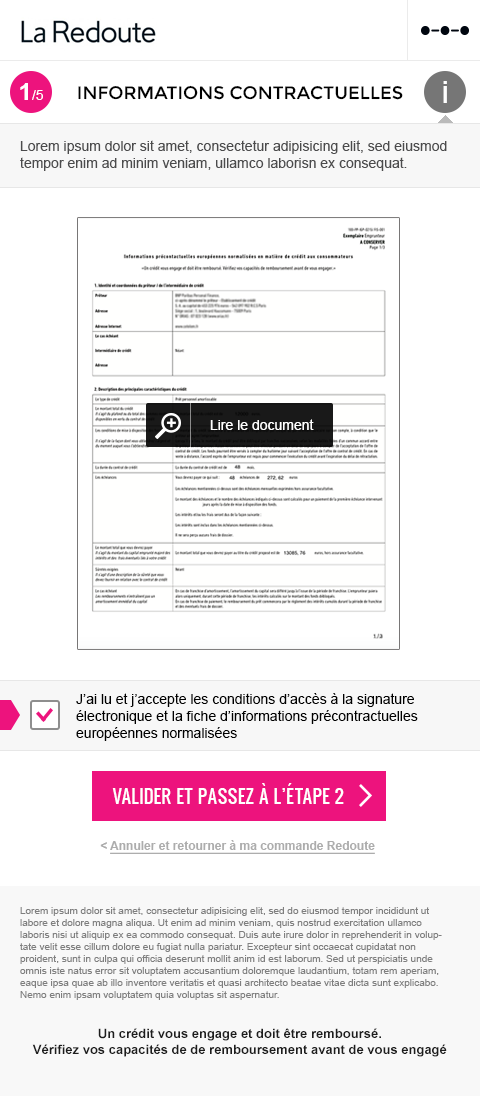
<style>
.page{position:relative;width:480px;height:1096px;background:#ffffff}
.page>*{position:absolute;margin:0}
.t1{font:14px "ArialMT";color:#ffffff}
.t2{font:24px "Arial-BoldMT";color:#ffffff}
.t3{font:18px "Montserrat-Regular";color:#000000;text-transform:uppercase}
.t4{font:25.8px "Oswald";color:#ffffff}
.t5{font:14px "ArialMT";color:#4b4b4c}
.t6{font:14px "ArialMT";color:#000000}
.t7{font:18px "Oswald";color:#ffffff;text-transform:uppercase}
.t8{font:12px "Arial-BoldMT";color:#adadad;text-decoration:underline}
.t9{font:12px "Arial-BoldMT";color:#adadad}
.t10{font:10px "ArialMT";color:#7f7f7f}
.t11{font:13px "Arial-BoldMT";color:#1d1d1d}
</style>
<div class="page">
<p class="t1" style="left:20px;top:83px;width:23px;height:17px"><span class="t2">1</span>/5</p>
<p class="t3" style="left:78px;top:85px;width:325px;height:15px">Informations cONTRACTUELLES</p>
<p class="t4" style="left:443px;top:81px;width:4px;height:22px">i</p>
<p class="t5" style="left:20px;top:140px;width:427px;height:31px">Lorem ipsum dolor sit amet, consectetur adipisicing elit, sed eiusmod tempor enim ad minim veniam, ullamco laborisn ex consequat.</p>
<p class="t1" style="left:210px;top:419px;width:104px;height:11px">Lire le document</p>
<p class="t6" style="left:76px;top:693px;width:342px;height:48px">J’ai lu et j’accepte les conditions d’accès à la signature<br>électronique et la fiche d’informations précontractuelles<br>européennes normalisées</p>
<p class="t7" style="left:112px;top:783px;width:232px;height:21px">Valider et passez à l’étape 2</p>
<p class="t8" style="left:100px;top:840px;width:275px;height:14px"><span class="t9">&lt; </span>Annuler et retourner à ma commande Redoute</p>
<p class="t10" style="left:20px;top:907px;width:422px;height:93px">Lorem ipsum dolor sit amet, consectetur adipisicing elit, sed do eiusmod tempor incididunt ut labore et dolore magna aliqua. Ut enim ad minim veniam, quis nostrud exercitation ullamco laboris nisi ut aliquip ex ea commodo consequat. Duis aute irure dolor in reprehenderit in voluptate velit esse cillum dolore eu fugiat nulla pariatur. Excepteur sint occaecat cupidatat non proident, sunt in culpa qui officia deserunt mollit anim id est laborum. Sed ut perspiciatis unde omnis iste natus error sit voluptatem accusantium doloremque laudantium, totam rem aperiam, eaque ipsa quae ab illo inventore veritatis et quasi architecto beatae vitae dicta sunt explicabo. Nemo enim ipsam voluptatem quia voluptas sit aspernatur.</p>
<p class="t11" style="left:32px;top:1028px;width:415px;height:29px;text-align:center">Un crédit vous engage et doit être remboursé.<br>Vérifiez vos capacités de de remboursement avant de vous engagé</p>
</div>
